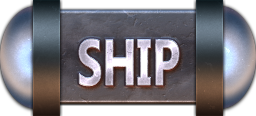
<style>
.page{position:relative;width:256px;height:116px}
.page>*{position:absolute;margin:0}
.t1{font:64.6px "SegoeUI-Bold";scale:0.71 1}
</style>
<div class="page">
<p class="t1" style="left:79px;top:39px;width:100px;height:47px">SHIP</p>
<p class="t1" style="left:79px;top:39px;width:100px;height:47px">SHIP</p>
</div>
